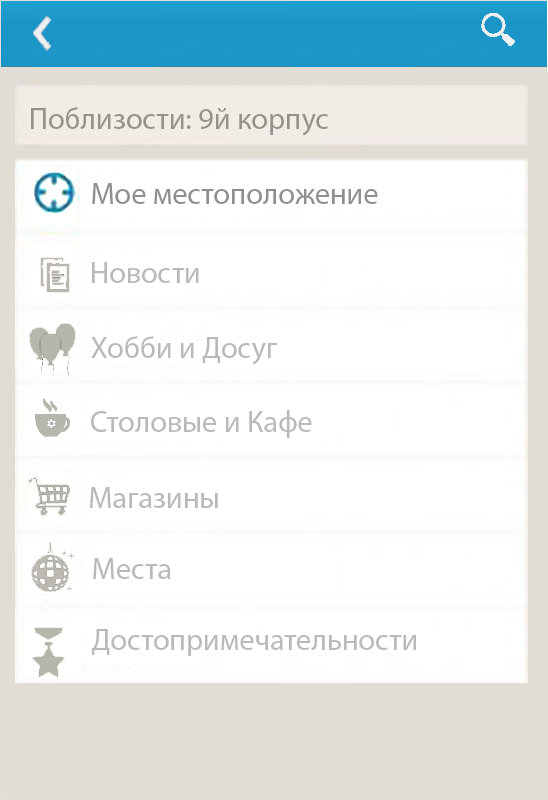
<style>
.page{position:relative;width:548px;height:800px;background:#ffffff}
.page>*{position:absolute;margin:0}
.t1{font:30.3px "MyriadPro-Regular";color:#95928d}
.t2{font:30.3px "MyriadPro-Regular";color:#908e8f}
.t3{font:30.3px "MyriadPro-Regular";color:#b9b9b7}
</style>
<div class="page">
<p class="t1" style="left:31px;top:107px;width:297px;height:29px">Поблизости: 9й корпус</p>
<p class="t2" style="left:92px;top:183px;width:286px;height:21px">Мое местоположение</p>
<p class="t3" style="left:92px;top:262px;width:107px;height:21px">Новости</p>
<p class="t3" style="left:91px;top:336px;width:186px;height:29px">Хобби и Досуг</p>
<p class="t3" style="left:91px;top:410px;width:221px;height:28px">Столовые и Кафе</p>
<p class="t3" style="left:90px;top:487px;width:128px;height:21px">Магазины</p>
<p class="t3" style="left:93px;top:558px;width:78px;height:21px">Места</p>
<p class="t3" style="left:92px;top:629px;width:324px;height:27px">Достопримечательности</p>
</div>
